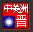
<style>
.page{position:relative;width:33px;height:32px;background:#f20000}
.page>*{position:absolute;margin:0}
.t1{font:10.4px "SimSun";letter-spacing:-0.25em;color:#ffffff}
.t2{font:11.7px "SimSun";color:#ffffff}
</style>
<div class="page">
<p class="t1" style="left:4px;top:4px;width:24px;height:9px">中美洲</p>
<p class="t2" style="left:16px;top:15px;width:11px;height:12px">晋</p>
</div>
